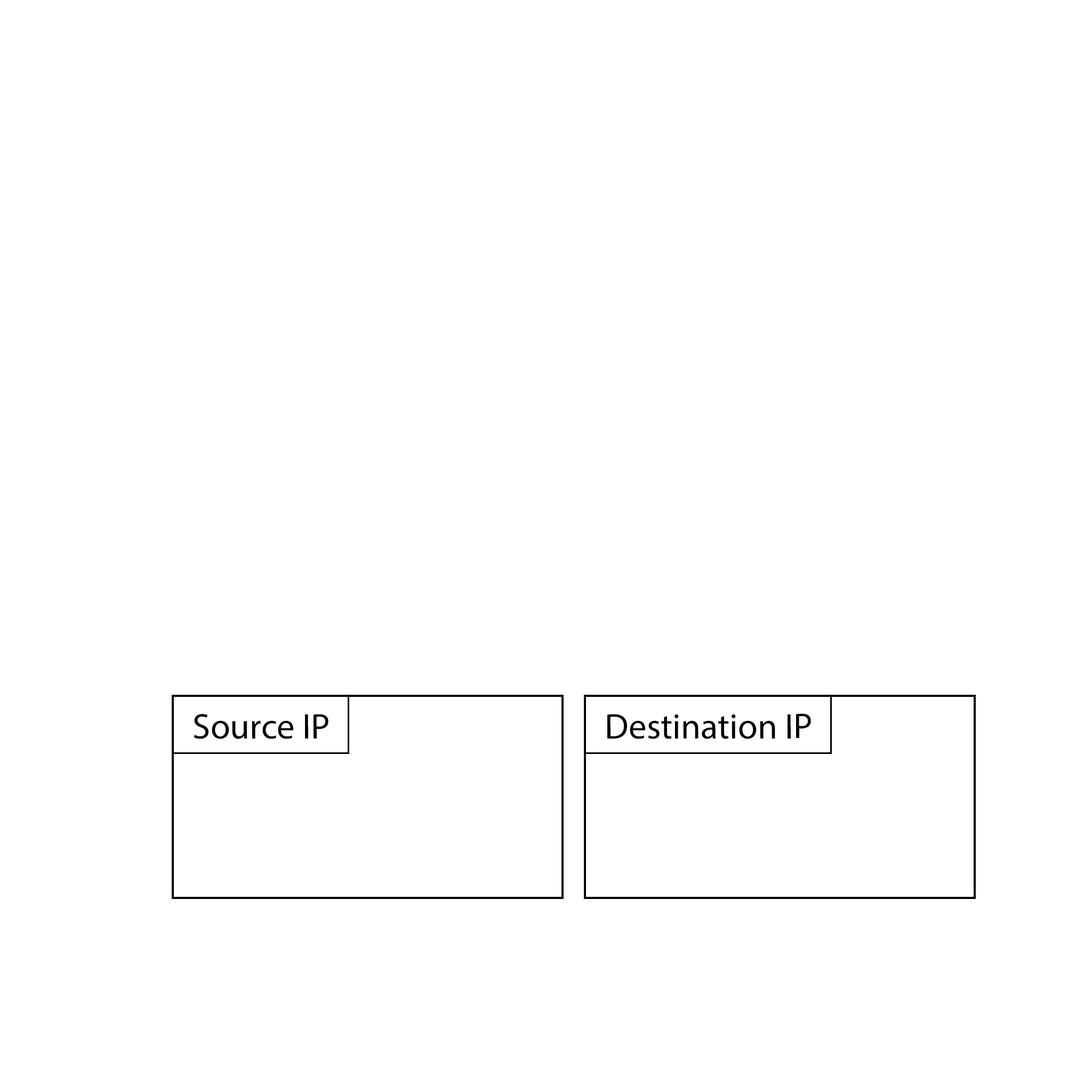
<style>
.page{position:relative;width:1092px;height:1092px;background:#ffffff}
.page>*{position:absolute;margin:0}
.t1{font:35.7px "MyriadPro-Regular";color:#000000}
</style>
<div class="page">
<p class="t1" style="left:194px;top:714px;width:134px;height:25px">Source IP</p>
<p class="t1" style="left:607px;top:713px;width:204px;height:26px">Destination IP</p>
</div>
